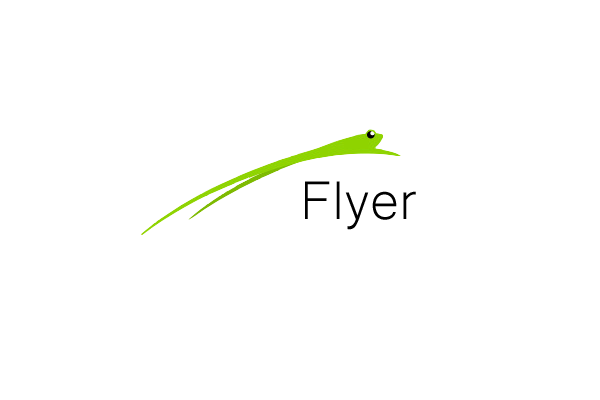
<style>
.page{position:relative;width:600px;height:400px;background:#ffffff}
.page>*{position:absolute;margin:0}
.t1{font:70px "Microsoft-Yi-Baiti";color:#000000}
</style>
<div class="page">
<p class="t1" style="left:305px;top:181px;width:111px;height:49px">Flyer</p>
</div>
